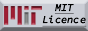
<style>
.page{position:relative;width:88px;height:31px;background:#cacdd5}
.page>*{position:absolute;margin:0}
.t1{font:10.4px "SourceCodePro-MediumIt";color:#000000;font-style:italic;text-decoration:underline}
</style>
<div class="page">
<p class="t1" style="left:42px;top:4px;width:45px;height:23px;text-align:center">MIT Licence</p>
</div>
